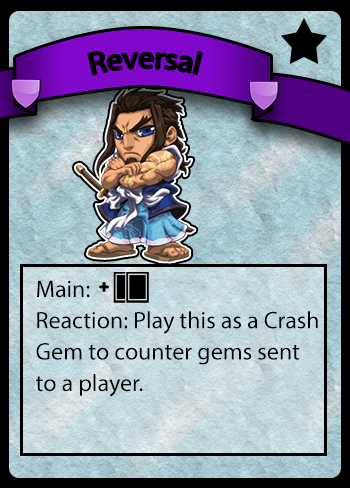
<style>
.page{position:relative;width:350px;height:488px}
.page>*{position:absolute;margin:0}
.t1{font:30px "MyriadPro-Regular";color:#000000}
.t2{font:24px "MyriadPro-Regular";color:#000000}
</style>
<div class="page">
<p class="t1" style="left:88px;top:52px;width:114px;height:23px">Reversal</p>
<p class="t2" style="left:36px;top:280px;width:282px;height:117px">Main:<br>Reaction: Play this as a Crash<br>Gem to counter gems sent<br>to a player.</p>
</div>
